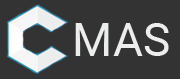
<style>
.page{position:relative;width:180px;height:79px;background:#333333}
.page>*{position:absolute;margin:0}
.t1{font:46.3px "Roboto-Regular";color:#eceded}
</style>
<div class="page">
<p class="t1" style="left:75px;top:23px;width:94px;height:33px">MAS</p>
</div>
